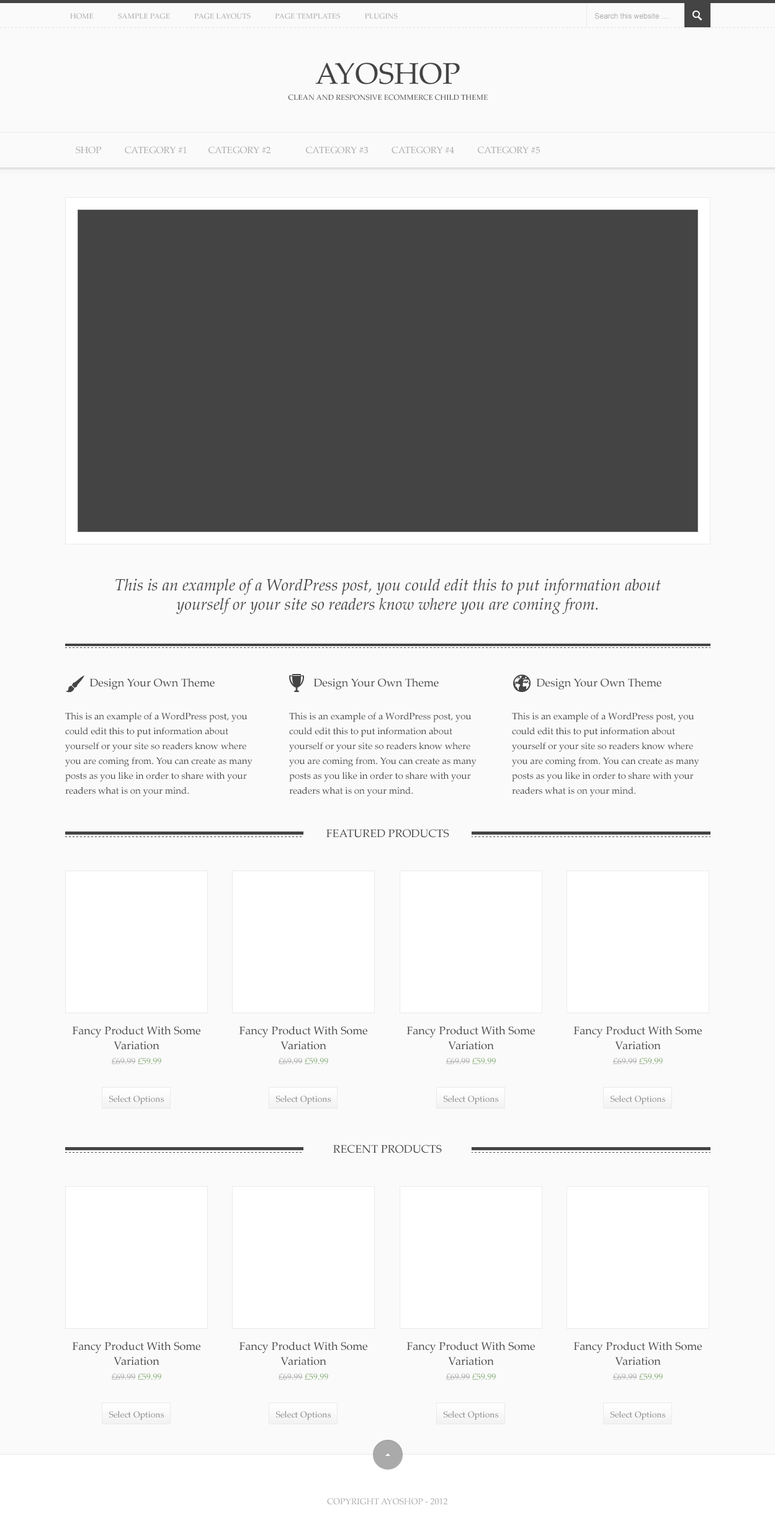
<style>
.page{position:relative;width:775px;height:1539px;background:#fafafa}
.page>*{position:absolute;margin:0}
.t1{font:7.4px "PalatinoLinotype-Roman";color:#aaaaaa;text-transform:uppercase}
.t2{font:7.4px "ArialMT";color:#aaaaaa}
.t3{font:29.8px "PalatinoLinotype-Roman";color:#444444;text-transform:uppercase}
.t4{font:7.4px "PalatinoLinotype-Roman";color:#444444;text-transform:uppercase}
.t5{font:9.3px "PalatinoLinotype-Roman";color:#aaaaaa;text-transform:uppercase}
.t6{font:16.1px "PalatinoLinotype-Italic";color:#444444}
.t7{font:11.2px "PalatinoLinotype-Roman";color:#444444}
.t8{font:9.3px/14.9px "PalatinoLinotype-Roman";color:#444444}
.t9{font:11.2px "PalatinoLinotype-Roman";color:#444444;text-transform:uppercase}
.t10{font:11.2px/14.9px "PalatinoLinotype-Roman";color:#444444}
.t11{font:8.7px/14.9px "PalatinoLinotype-Roman";color:#aaaaaa}
.t12{font:8.7px/14.9px "PalatinoLinotype-Roman";color:#85ad74}
.t13{font:8.7px "PalatinoLinotype-Roman";color:#888888}
.t14{font:8.7px "PalatinoLinotype-Roman";color:#aaaaaa;text-transform:uppercase}
</style>
<div class="page">
<p class="t1" style="left:70px;top:13px;width:328px;height:6px">Home             Sample Page             Page Layouts             Page Templates             Plugins</p>
<p class="t2" style="left:594px;top:13px;width:75px;height:6px">Search this website ....</p>
<p class="t3" style="left:315px;top:63px;width:145px;height:21px">AyoSHOP</p>
<p class="t4" style="left:288px;top:94px;width:199px;height:6px">clean and responsive ecommerce child theme</p>
<p class="t5" style="left:76px;top:146px;width:464px;height:8px">Shop          Category #1         Category #2               Category #3          Category #4          Category #5</p>
<p class="t6" style="left:115px;top:579px;width:546px;height:36px;text-align:center">This is an example of a WordPress post, you could edit this to put information about yourself or your site so readers know where you are coming from.</p>
<p class="t7" style="left:89px;top:679px;width:126px;height:11px">Design Your Own Theme</p>
<p class="t7" style="left:313px;top:679px;width:125px;height:11px">Design Your Own Theme</p>
<p class="t7" style="left:536px;top:679px;width:125px;height:11px">Design Your Own Theme</p>
<p class="t8" style="left:65px;top:713px;width:187px;height:84px">This is an example of a WordPress post, you could edit this to put information about yourself or your site so readers know where you are coming from. You can create as many posts as you like in order to share with your readers what is on your mind.</p>
<p class="t8" style="left:289px;top:713px;width:187px;height:84px">This is an example of a WordPress post, you could edit this to put information about yourself or your site so readers know where you are coming from. You can create as many posts as you like in order to share with your readers what is on your mind.</p>
<p class="t8" style="left:512px;top:713px;width:187px;height:84px">This is an example of a WordPress post, you could edit this to put information about yourself or your site so readers know where you are coming from. You can create as many posts as you like in order to share with your readers what is on your mind.</p>
<p class="t9" style="left:326px;top:829px;width:123px;height:9px">Featured Products</p>
<p class="t10" style="left:72px;top:1026px;width:128px;height:39px;text-align:center">Fancy Product With Some Variation<br><span class="t11">£69.99</span><span class="t12"> £59.99</span></p>
<p class="t10" style="left:239px;top:1026px;width:128px;height:39px;text-align:center">Fancy Product With Some Variation<br><span class="t11">£69.99</span><span class="t12"> £59.99</span></p>
<p class="t10" style="left:406px;top:1026px;width:129px;height:39px;text-align:center">Fancy Product With Some Variation<br><span class="t11">£69.99</span><span class="t12"> £59.99</span></p>
<p class="t10" style="left:573px;top:1026px;width:128px;height:39px;text-align:center">Fancy Product With Some Variation<br><span class="t11">£69.99</span><span class="t12"> £59.99</span></p>
<p class="t13" style="left:109px;top:1095px;width:55px;height:10px">Select Options</p>
<p class="t13" style="left:276px;top:1095px;width:55px;height:10px">Select Options</p>
<p class="t13" style="left:443px;top:1095px;width:55px;height:10px">Select Options</p>
<p class="t13" style="left:610px;top:1095px;width:55px;height:10px">Select Options</p>
<p class="t9" style="left:333px;top:1145px;width:109px;height:9px">Recent Products</p>
<p class="t10" style="left:72px;top:1342px;width:128px;height:39px;text-align:center">Fancy Product With Some Variation<br><span class="t11">£69.99</span><span class="t12"> £59.99</span></p>
<p class="t10" style="left:239px;top:1342px;width:128px;height:39px;text-align:center">Fancy Product With Some Variation<br><span class="t11">£69.99</span><span class="t12"> £59.99</span></p>
<p class="t10" style="left:406px;top:1342px;width:129px;height:39px;text-align:center">Fancy Product With Some Variation<br><span class="t11">£69.99</span><span class="t12"> £59.99</span></p>
<p class="t10" style="left:573px;top:1342px;width:128px;height:39px;text-align:center">Fancy Product With Some Variation<br><span class="t11">£69.99</span><span class="t12"> £59.99</span></p>
<p class="t13" style="left:109px;top:1411px;width:55px;height:9px">Select Options</p>
<p class="t13" style="left:276px;top:1411px;width:55px;height:9px">Select Options</p>
<p class="t13" style="left:443px;top:1411px;width:55px;height:9px">Select Options</p>
<p class="t13" style="left:610px;top:1411px;width:55px;height:9px">Select Options</p>
<p class="t14" style="left:327px;top:1498px;width:120px;height:7px">Copyright AyoShop - 2012</p>
</div>
